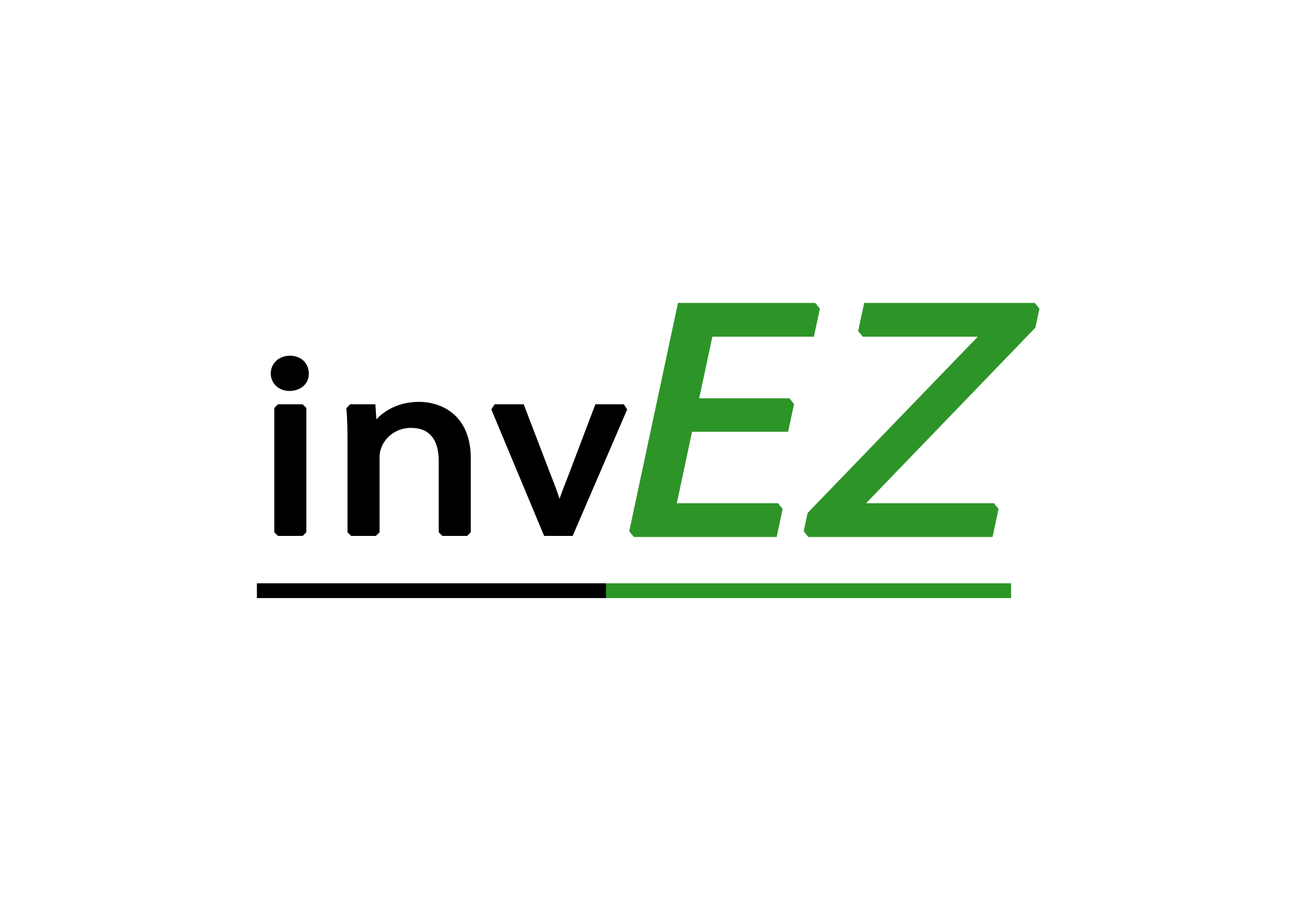
<style>
.page{position:relative;width:1292px;height:923px;background:#ffffff}
.page>*{position:absolute;margin:0}
.t1{font:256.4px "MyriadPro-Regular";color:#000000;font-weight:bold;text-decoration:underline;scale:1.1 1}
.t2{font:256.4px "MyriadPro-Regular";letter-spacing:-0.1em;color:#000000;font-weight:bold;text-decoration:underline;scale:1.1 1}
.t3{font:333.3px "MyriadPro-Regular";color:#2d9428;font-weight:bold;font-style:italic;text-decoration:underline;scale:1.1 1}
</style>
<div class="page">
<p class="t1" style="left:257px;top:303px;width:783px;height:295px">in<span class="t2">v</span><span class="t3">EZ</span></p>
</div>
